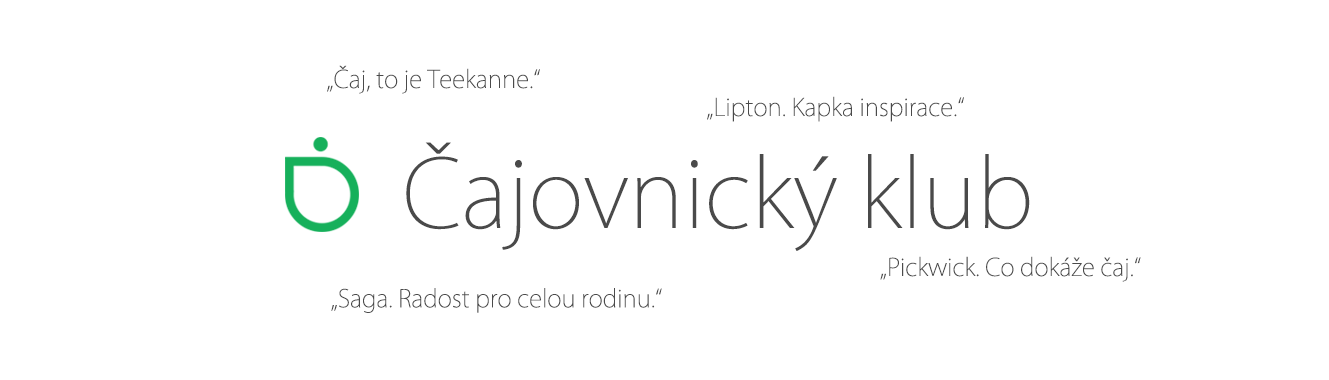
<style>
.page{position:relative;width:1329px;height:380px;background:#ffffff}
.page>*{position:absolute;margin:0}
.t1{font:24px "KozGoPr6N-ExtraLight";color:#4a4a4a}
.t2{font:93px "KozGoPr6N-ExtraLight";color:#4a4a4a}
</style>
<div class="page">
<p class="t1" style="left:327px;top:65px;width:213px;height:29px">„Čaj, to je Teekanne.“</p>
<p class="t1" style="left:707px;top:96px;width:257px;height:26px">„Lipton. Kapka inspirace.“</p>
<p class="t2" style="left:406px;top:142px;width:624px;height:109px">Čajovnický klub</p>
<p class="t1" style="left:880px;top:256px;width:261px;height:26px">„Pickwick. Co dokáže čaj.“</p>
<p class="t1" style="left:331px;top:288px;width:331px;height:25px">„Saga. Radost pro celou rodinu.“</p>
</div>
